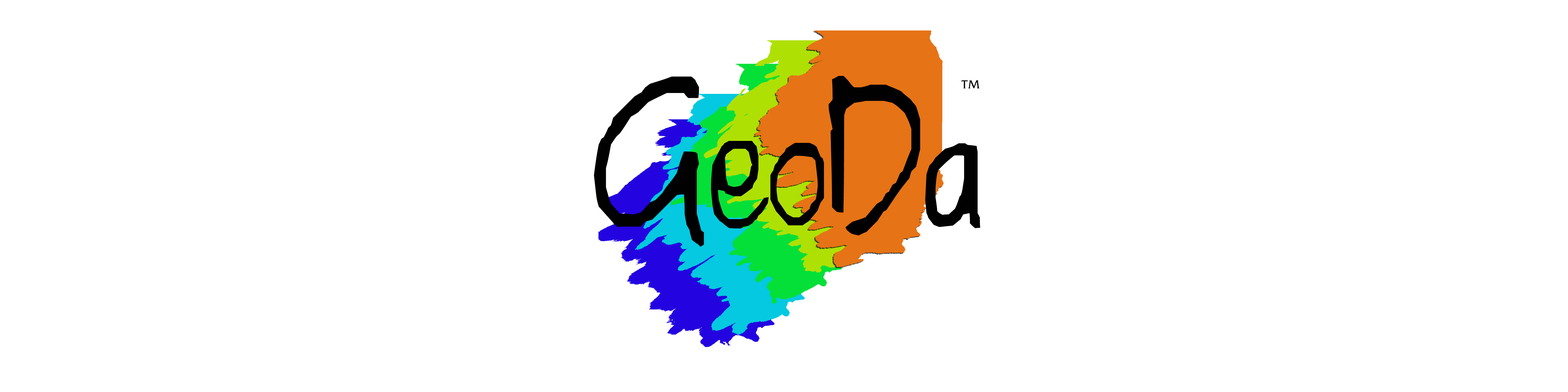
<style>
.page{position:relative;width:1568px;height:392px;background:#ffffff}
.page>*{position:absolute;margin:0}
.t1{font:239.9px "Watertank-Regular";color:#010101}
.t2{font:10.9px "Franzquo";color:#010101}
</style>
<div class="page">
<p class="t1" style="left:594px;top:76px;width:386px;height:171px">GeoDa</p>
<p class="t2" style="left:961px;top:80px;width:19px;height:8px">TM</p>
</div>
